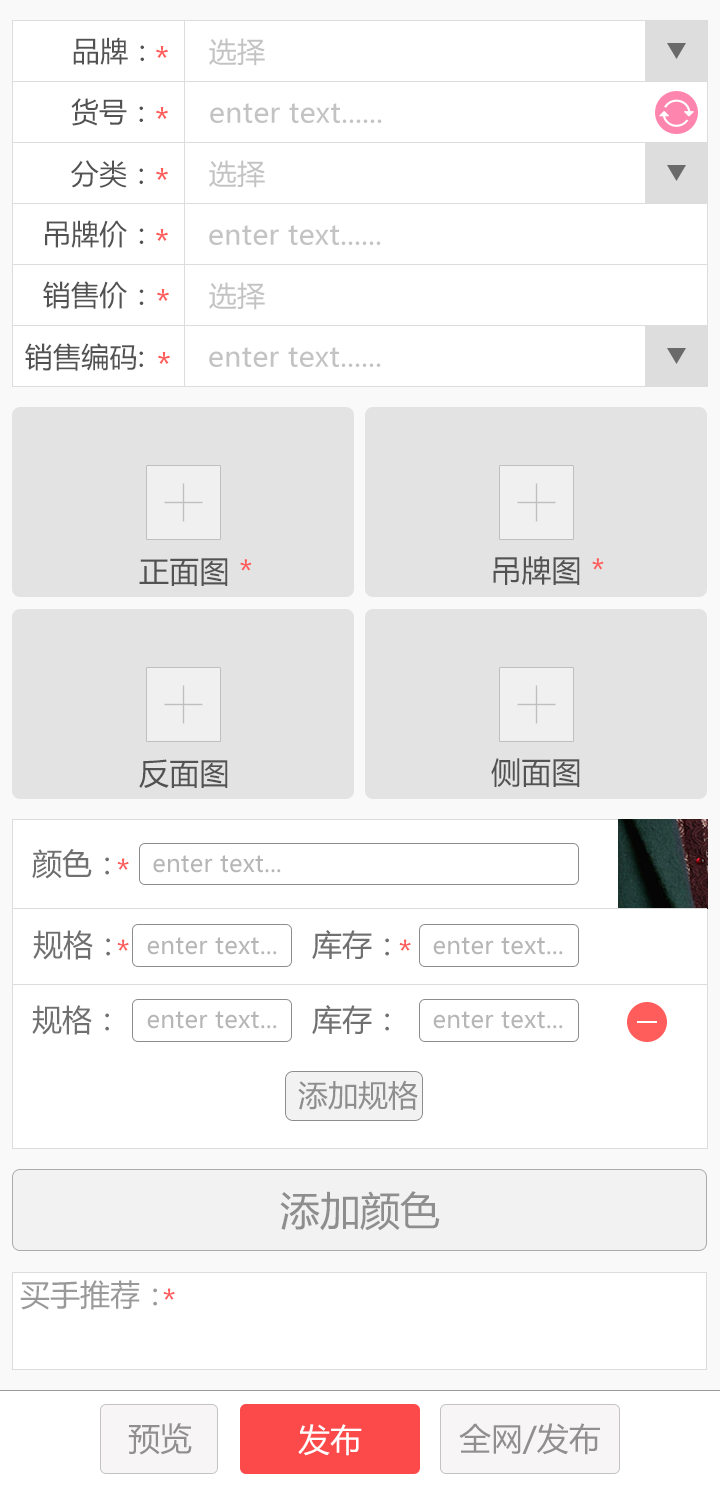
<style>
.page{position:relative;width:720px;height:1486px;background:#ffffff}
.page>*{position:absolute;margin:0}
.t1{font:28px "MicrosoftYaHei";letter-spacing:0.01em;color:#525252}
.t2{font:28px "MicrosoftYaHei";letter-spacing:0.01em;color:#c3c3c3}
.t3{font:32px "MicrosoftYaHei";letter-spacing:0.01em;color:#ff5c5c}
.t4{font:30px "MicrosoftYaHei";letter-spacing:0.01em;color:#525252}
.t5{font:30px "MicrosoftYaHei";letter-spacing:0.01em;color:#ff5c5c}
.t6{font:30px "MicrosoftYaHei";color:#707070}
.t7{font:24px "MicrosoftYaHei";letter-spacing:0.01em;color:#b6b6b6}
.t8{font:30px "MicrosoftYaHei";color:#ff5c5c}
.t9{font:30px "MicrosoftYaHei";color:#8e8e8e}
.t10{font:40px "MicrosoftYaHei";color:#8e8e8e}
.t11{font:30px "MicrosoftYaHei";color:#999999}
.t12{font:32px "MicrosoftYaHei";color:#8f8f8f}
.t13{font:32px "MicrosoftYaHei";color:#ffffff}
</style>
<div class="page">
<p class="t1" style="left:73px;top:37px;width:71px;height:28px">品牌：</p>
<p class="t2" style="left:209px;top:38px;width:56px;height:28px">选择</p>
<p class="t3" style="left:156px;top:46px;width:12px;height:12px">*</p>
<p class="t1" style="left:71px;top:98px;width:72px;height:28px">货号：</p>
<p class="t3" style="left:156px;top:107px;width:12px;height:12px">*</p>
<p class="t2" style="left:210px;top:103px;width:172px;height:20px">enter text......</p>
<p class="t1" style="left:71px;top:160px;width:72px;height:28px">分类：</p>
<p class="t2" style="left:209px;top:160px;width:56px;height:28px">选择</p>
<p class="t3" style="left:156px;top:168px;width:12px;height:12px">*</p>
<p class="t1" style="left:45px;top:220px;width:99px;height:28px">吊牌价：</p>
<p class="t3" style="left:156px;top:229px;width:12px;height:12px">*</p>
<p class="t2" style="left:209px;top:225px;width:172px;height:20px">enter text......</p>
<p class="t1" style="left:43px;top:281px;width:101px;height:28px">销售价：</p>
<p class="t3" style="left:157px;top:289px;width:12px;height:12px">*</p>
<p class="t2" style="left:209px;top:282px;width:56px;height:28px">选择</p>
<p class="t1" style="left:25px;top:343px;width:118px;height:28px">销售编码:</p>
<p class="t3" style="left:158px;top:352px;width:12px;height:12px">*</p>
<p class="t2" style="left:209px;top:347px;width:172px;height:20px">enter text......</p>
<p class="t4" style="left:139px;top:558px;width:113px;height:28px">正面图<span class="t5"> *</span></p>
<p class="t4" style="left:493px;top:556px;width:111px;height:29px">吊牌图<span class="t5"> *</span></p>
<p class="t4" style="left:139px;top:759px;width:89px;height:29px">反面图</p>
<p class="t4" style="left:491px;top:758px;width:89px;height:29px">侧面图</p>
<p class="t6" style="left:32px;top:849px;width:77px;height:30px">颜色：</p>
<p class="t7" style="left:153px;top:855px;width:128px;height:18px">enter text...</p>
<p class="t8" style="left:117px;top:858px;width:12px;height:12px">*</p>
<p class="t6" style="left:33px;top:930px;width:77px;height:30px">规格：</p>
<p class="t8" style="left:117px;top:939px;width:12px;height:12px">*</p>
<p class="t7" style="left:147px;top:937px;width:130px;height:18px">enter text...</p>
<p class="t6" style="left:312px;top:930px;width:77px;height:30px">库存：</p>
<p class="t8" style="left:399px;top:939px;width:12px;height:12px">*</p>
<p class="t7" style="left:433px;top:937px;width:130px;height:18px">enter text...</p>
<p class="t6" style="left:32px;top:1005px;width:77px;height:30px">规格：</p>
<p class="t7" style="left:147px;top:1011px;width:130px;height:18px">enter text...</p>
<p class="t6" style="left:312px;top:1005px;width:77px;height:30px">库存：</p>
<p class="t7" style="left:433px;top:1011px;width:130px;height:18px">enter text...</p>
<p class="t9" style="left:298px;top:1080px;width:120px;height:30px">添加规格</p>
<p class="t10" style="left:280px;top:1191px;width:160px;height:40px">添加颜色</p>
<p class="t11" style="left:20px;top:1280px;width:137px;height:30px">买手推荐：</p>
<p class="t8" style="left:163px;top:1288px;width:12px;height:12px">*</p>
<p class="t12" style="left:128px;top:1423px;width:64px;height:32px">预览</p>
<p class="t13" style="left:298px;top:1424px;width:64px;height:32px">发布</p>
<p class="t12" style="left:459px;top:1423px;width:141px;height:32px">全网/发布</p>
</div>
